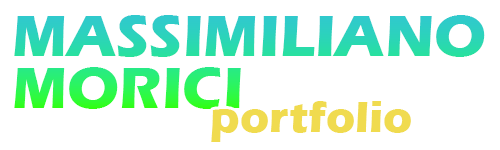
<style>
.page{position:relative;width:500px;height:150px;background:#ffffff}
.page>*{position:absolute;margin:0}
.t1{font:60.3px/51.9px "ErasITC-Bold"}
.t2{font:45.4px "ErasITC-Bold";color:#f0db4f}
</style>
<div class="page">
<p class="t1" style="left:14px;top:15px;width:471px;height:94px">MASSIMILIANO <br>MORICI</p>
<p class="t2" style="left:211px;top:101px;width:200px;height:41px">portfolio</p>
</div>
